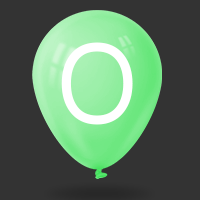
<style>
.page{position:relative;width:200px;height:200px;background:#333333}
.page>*{position:absolute;margin:0}
.t1{font:104.2px "Gulim";color:#ffffff;font-weight:bold}
</style>
<div class="page">
<p class="t1" style="left:61px;top:42px;width:72px;height:83px">O</p>
</div>
